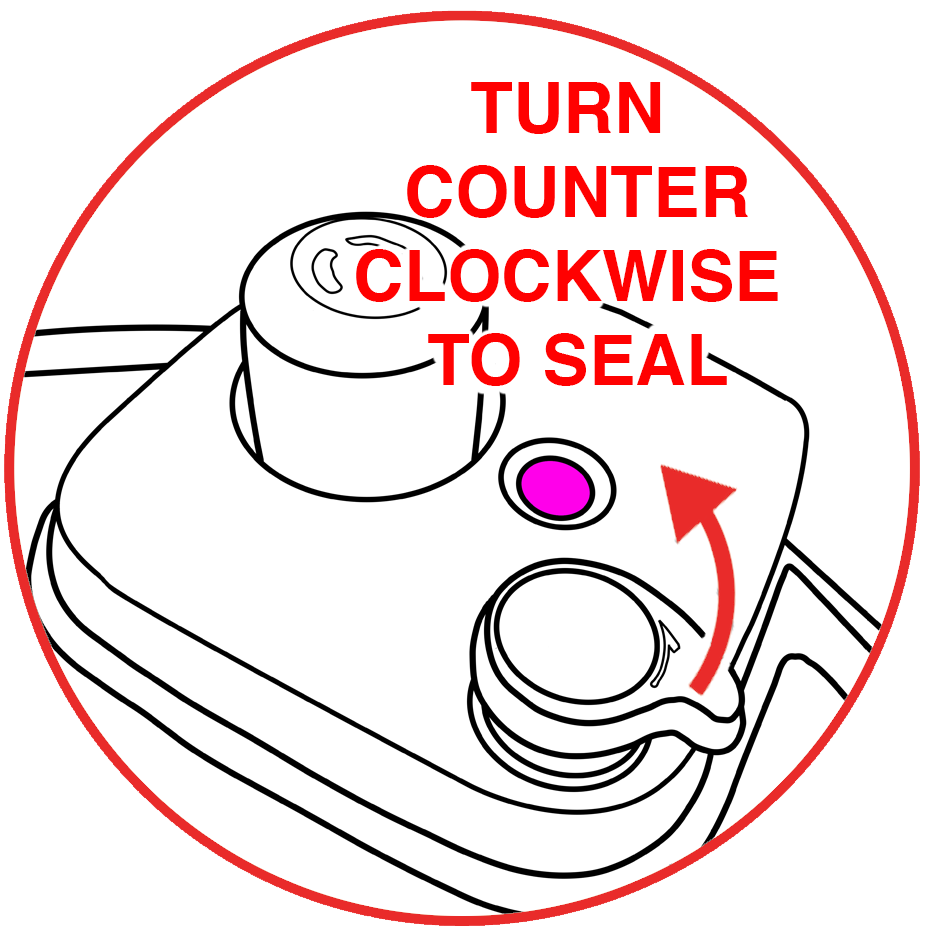
<style>
.page{position:relative;width:930px;height:940px;background:#ffffff}
.page>*{position:absolute;margin:0}
.t1{font:70px "Helvetica-Bold";color:#ff0101}
</style>
<div class="page">
<p class="t1" style="left:356px;top:82px;width:422px;height:304px;text-align:center">TURN <br>COUNTER<br>CLOCKWISE <br>TO SEAL</p>
</div>
